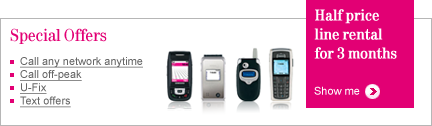
<style>
.page{position:relative;width:432px;height:126px;background:#ffffff}
.page>*{position:absolute;margin:0}
.t1{font:16px/19px "Tele-Antiqua";letter-spacing:-0.002em;color:#ffffff;font-weight:bold}
.t2{font:18px "Tele-Antiqua";color:#e20074}
.t3{font:11px "ArialMT";color:#666666;text-decoration:underline}
.t4{font:11px "ArialMT";color:#ffffff}
</style>
<div class="page">
<p class="t1" style="left:314px;top:9px;width:83px;height:50px">Half price line rental for 3 months</p>
<p class="t2" style="left:10px;top:28px;width:97px;height:16px">Special Offers</p>
<p class="t3" style="left:20px;top:57px;width:123px;height:51px">Call any network anytime<br>Call off-peak<br>U-Fix<br>Text offers</p>
<p class="t4" style="left:314px;top:86px;width:46px;height:9px">Show me</p>
</div>
